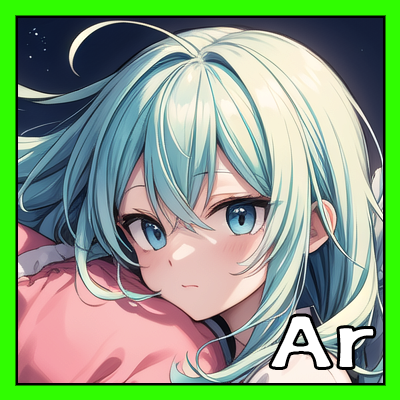
<style>
.page{position:relative;width:400px;height:400px}
.page>*{position:absolute;margin:0}
.t1{font:74.2px "YetR-HM";color:#ffffff;font-weight:bold;scale:1.33 1}
</style>
<div class="page">
<p class="t1" style="left:270px;top:315px;width:105px;height:54px">Ar</p>
</div>
